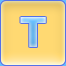
<style>
.page{position:relative;width:66px;height:66px;background:#ffd972}
.page>*{position:absolute;margin:0}
.t1{font:41px "Tahoma-Bold"}
</style>
<div class="page">
<p class="t1" style="left:20px;top:17px;width:26px;height:30px">Т</p>
<p class="t1" style="left:20px;top:17px;width:26px;height:30px">Т</p>
</div>
